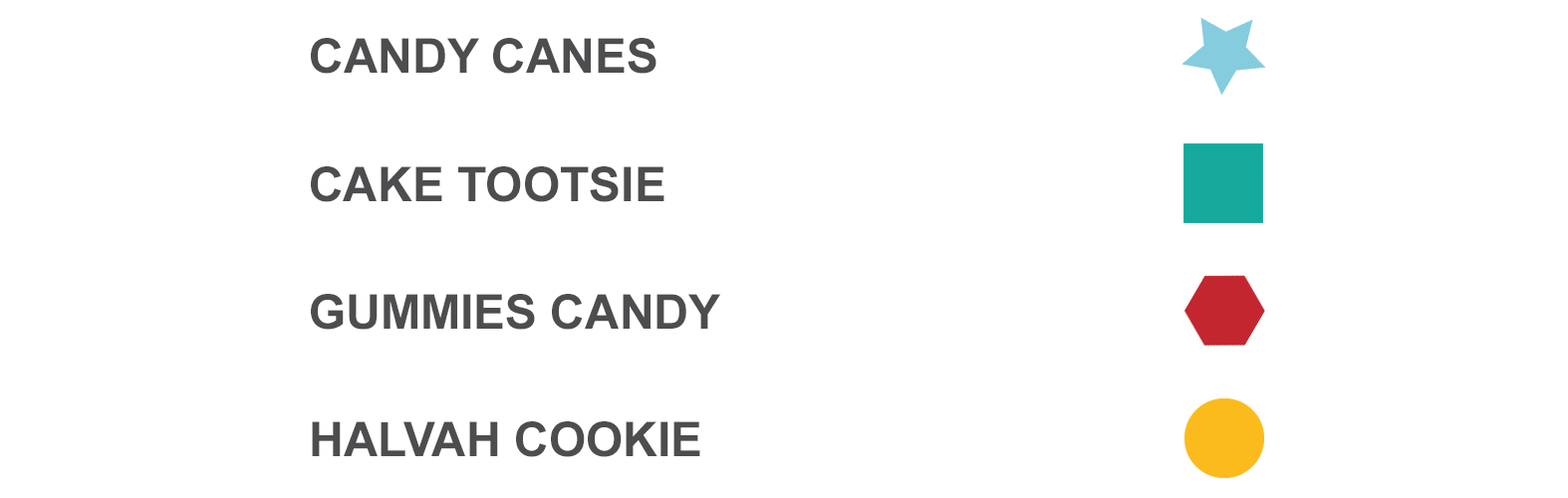
<style>
.page{position:relative;width:1568px;height:498px;background:#ffffff}
.page>*{position:absolute;margin:0}
.t1{font:47.7px "Arial-BoldMT";color:#4d4d4f}
.t2{font:47.8px "Arial-BoldMT";color:#4d4d4f}
</style>
<div class="page">
<p class="t1" style="left:311px;top:38px;width:345px;height:36px">candy canes</p>
<p class="t2" style="left:311px;top:166px;width:353px;height:36px">cake tootsie</p>
<p class="t2" style="left:311px;top:294px;width:409px;height:36px">gummies candy</p>
<p class="t1" style="left:312px;top:421px;width:388px;height:36px">Halvah cookie</p>
</div>
